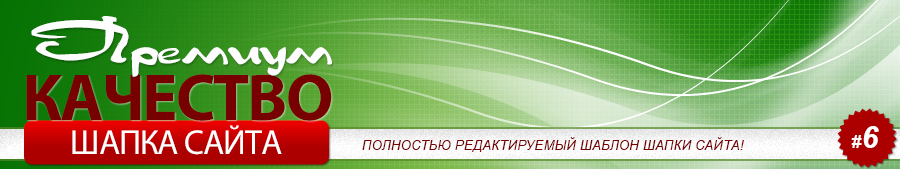
<style>
.page{position:relative;width:900px;height:169px}
.page>*{position:absolute;margin:0}
.t1{font:57.1px "NadejdaBold";letter-spacing:-0.03em;color:#fefefe}
.t2{font:66.6px "MyriadPro-Bold";letter-spacing:-0.03em;color:#770000;text-transform:uppercase}
.t3{font:34.8px "MyriadPro-Regular";letter-spacing:-0.03em;color:#ffffff;text-transform:uppercase}
.t4{font:18px "Arial-BoldItalicMT";letter-spacing:0.025em;color:#fefefe;text-transform:uppercase}
.t5{font:30.4px "Arial-BoldItalicMT";letter-spacing:0.025em;color:#fefefe;text-transform:uppercase}
.t6{font:13px "Arial-ItalicMT";letter-spacing:0.025em;color:#770000;text-transform:uppercase}
</style>
<div class="page">
<p class="t1" style="left:31px;top:16px;width:301px;height:61px">Премиум</p>
<p class="t2" style="left:26px;top:74px;width:306px;height:47px">КАЧЕСТВО</p>
<p class="t3" style="left:72px;top:125px;width:210px;height:30px">ШАПКА САЙТА</p>
<p class="t4" style="left:851px;top:126px;width:28px;height:22px">#<span class="t5">6</span></p>
<p class="t6" style="left:362px;top:137px;width:382px;height:15px">ПОЛНОСТЬЮ РЕДАктируемый шаблон шапки сайта!</p>
</div>
